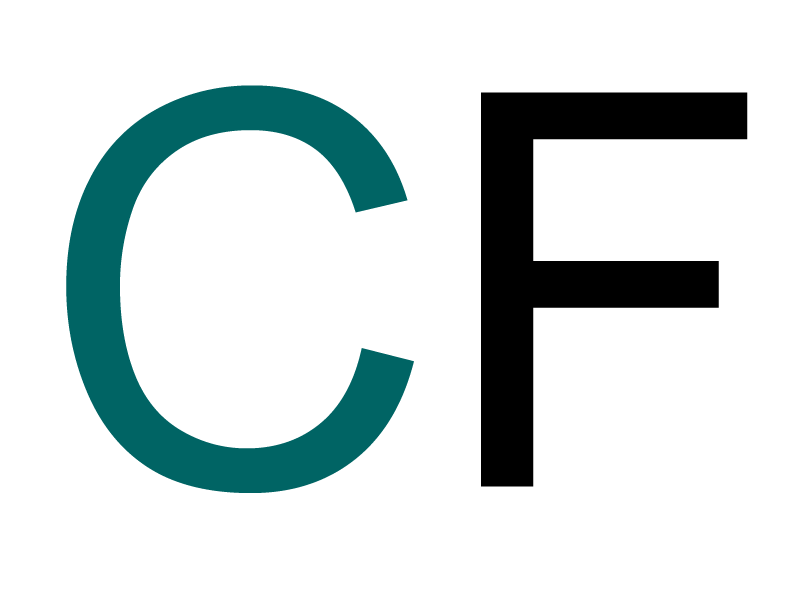
<style>
.page{position:relative;width:800px;height:600px;background:#ffffff}
.page>*{position:absolute;margin:0}
.t1{font:550px "ArialMT";color:#006464}
.t2{font:550px "ArialMT";color:#000000}
</style>
<div class="page">
<p class="t1" style="left:66px;top:85px;width:682px;height:408px">C<span class="t2">F</span></p>
</div>
